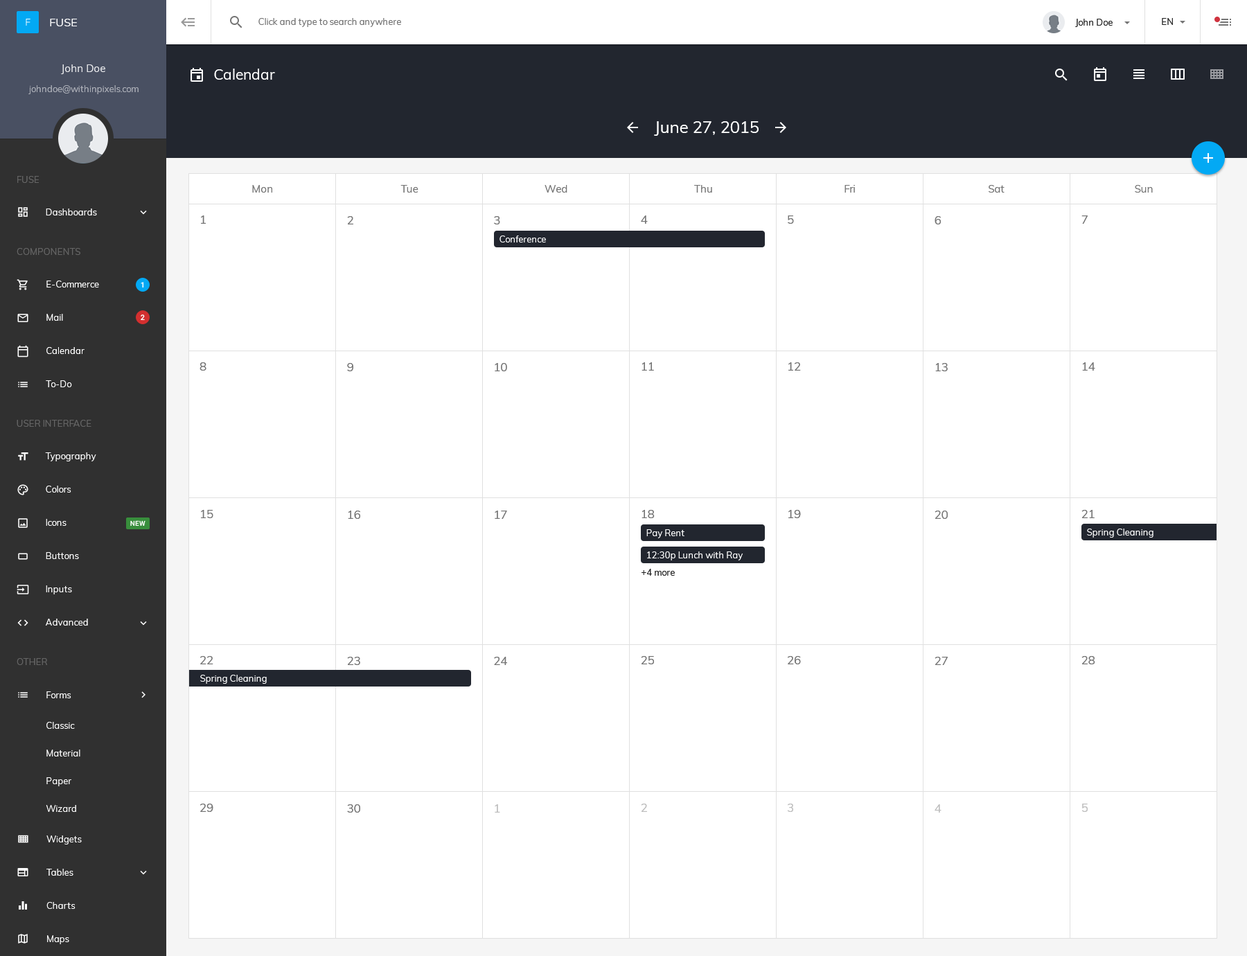
<style>
.page{position:relative;width:1247px;height:956px;background:#ffffff}
.page>*{position:absolute;margin:0}
.t1{font:14.5px "Muli-Regular";color:#ffffff}
.t2{font:16.6px "Muli-Regular";color:#ffffff}
.t3{font:10.4px "Muli-Regular";color:#757575}
.t4{font:11.8px "Muli-Regular";color:#757575}
.t5{font:9px "Muli-Regular";color:#ffffff}
.t6{font:9px "Muli-Regular";color:#212121}
.t7{font:11.8px "Muli-Regular";color:#bdbdbd}
</style>
<div class="page">
<p class="t1" style="left:214px;top:69px;width:61px;height:11px">Calendar</p>
<p class="t2" style="left:654px;top:121px;width:105px;height:15px">June 27, 2015</p>
<p class="t3" style="left:252px;top:185px;width:20px;height:8px">Mon</p>
<p class="t3" style="left:400px;top:185px;width:18px;height:8px">Tue</p>
<p class="t3" style="left:545px;top:185px;width:22px;height:8px">Wed</p>
<p class="t3" style="left:694px;top:185px;width:18px;height:8px">Thu</p>
<p class="t3" style="left:845px;top:185px;width:10px;height:8px">Fri</p>
<p class="t3" style="left:989px;top:185px;width:16px;height:8px">Sat</p>
<p class="t3" style="left:1135px;top:185px;width:18px;height:8px">Sun</p>
<p class="t4" style="left:201px;top:215px;width:5px;height:9px">1</p>
<p class="t4" style="left:347px;top:216px;width:6px;height:8px">2</p>
<p class="t4" style="left:494px;top:216px;width:6px;height:8px">3</p>
<p class="t4" style="left:641px;top:215px;width:7px;height:9px">4</p>
<p class="t4" style="left:788px;top:215px;width:6px;height:9px">5</p>
<p class="t4" style="left:935px;top:216px;width:6px;height:8px">6</p>
<p class="t4" style="left:1082px;top:215px;width:6px;height:9px">7</p>
<p class="t5" style="left:500px;top:236px;width:46px;height:6px">Conference</p>
<p class="t4" style="left:200px;top:362px;width:6px;height:9px">8</p>
<p class="t4" style="left:347px;top:363px;width:6px;height:8px">9</p>
<p class="t4" style="left:495px;top:363px;width:12px;height:8px">10</p>
<p class="t4" style="left:642px;top:362px;width:12px;height:9px">11</p>
<p class="t4" style="left:788px;top:362px;width:13px;height:9px">12</p>
<p class="t4" style="left:935px;top:363px;width:13px;height:8px">13</p>
<p class="t4" style="left:1082px;top:362px;width:13px;height:9px">14</p>
<p class="t4" style="left:201px;top:510px;width:12px;height:8px">15</p>
<p class="t4" style="left:642px;top:510px;width:13px;height:8px">18</p>
<p class="t4" style="left:788px;top:510px;width:13px;height:8px">19</p>
<p class="t4" style="left:1082px;top:510px;width:13px;height:8px">21</p>
<p class="t4" style="left:348px;top:511px;width:12px;height:8px">16</p>
<p class="t4" style="left:495px;top:511px;width:12px;height:8px">17</p>
<p class="t4" style="left:935px;top:511px;width:13px;height:8px">20</p>
<p class="t5" style="left:646px;top:529px;width:39px;height:9px">Pay Rent</p>
<p class="t5" style="left:1087px;top:529px;width:67px;height:9px">Spring Cleaning</p>
<p class="t5" style="left:647px;top:552px;width:96px;height:9px">12:30p Lunch with Ray</p>
<p class="t6" style="left:642px;top:569px;width:33px;height:7px">+4 more</p>
<p class="t4" style="left:200px;top:656px;width:13px;height:8px">22</p>
<p class="t4" style="left:347px;top:657px;width:13px;height:8px">23</p>
<p class="t4" style="left:494px;top:657px;width:13px;height:8px">24</p>
<p class="t4" style="left:641px;top:656px;width:13px;height:8px">25</p>
<p class="t4" style="left:788px;top:656px;width:13px;height:8px">26</p>
<p class="t4" style="left:935px;top:657px;width:13px;height:8px">27</p>
<p class="t4" style="left:1082px;top:656px;width:13px;height:8px">28</p>
<p class="t5" style="left:200px;top:675px;width:67px;height:9px">Spring Cleaning</p>
<p class="t4" style="left:200px;top:804px;width:13px;height:8px">29</p>
<p class="t4" style="left:347px;top:804px;width:13px;height:9px">30</p>
<p class="t7" style="left:495px;top:804px;width:5px;height:9px">1</p>
<p class="t7" style="left:641px;top:804px;width:6px;height:8px">2</p>
<p class="t7" style="left:787px;top:804px;width:6px;height:8px">3</p>
<p class="t7" style="left:935px;top:804px;width:7px;height:9px">4</p>
<p class="t7" style="left:1082px;top:804px;width:6px;height:8px">5</p>
</div>
